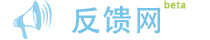
<style>
.page{position:relative;width:210px;height:40px;background:#ffffff}
.page>*{position:absolute;margin:0}
.t1{font:30px "AdobeHeitiStd-Regular";letter-spacing:0.05em;color:#75c3eb}
.t2{font:10px "AdobeHeitiStd-Regular";letter-spacing:0.05em;color:#a9cc4a}
</style>
<div class="page">
<p class="t1" style="left:72px;top:5px;width:89px;height:29px">反馈网</p>
<p class="t2" style="left:164px;top:0px;width:22px;height:9px">beta</p>
</div>
